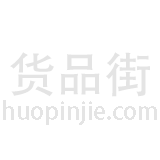
<style>
.page{position:relative;width:160px;height:160px;background:#ffffff}
.page>*{position:absolute;margin:0}
.t1{font:48px "STHeitiSC-Medium";color:#e4e4e4}
.t2{font:24px "AdobeHeitiStd-Regular";color:#e4e4e4}
</style>
<div class="page">
<p class="t1" style="left:10px;top:52px;width:140px;height:45px">货品街</p>
<p class="t2" style="left:3px;top:100px;width:154px;height:25px">huopinjie.com</p>
</div>
